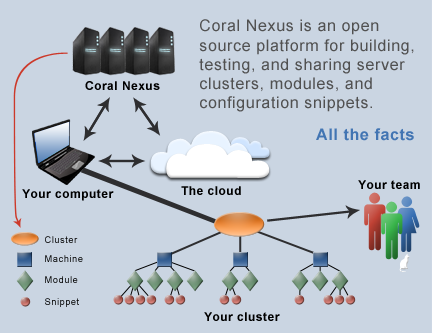
<style>
.page{position:relative;width:432px;height:333px;background:#cad5e2}
.page>*{position:absolute;margin:0}
.t1{font:16px "ArialMT";letter-spacing:0.04em;color:#515151}
.t2{font:12px "Arial-BoldMT";letter-spacing:0.04em;color:#000000}
.t3{font:16px "Arial-BoldMT";letter-spacing:0.04em;color:#4275b3}
.t4{font:9.6px "ArialMT";letter-spacing:0.04em;color:#010101}
.t5{font:9.6px "ArialMT";letter-spacing:0.04em}
</style>
<div class="page">
<p class="t1" style="left:199px;top:19px;width:215px;height:93px">Coral Nexus is an open source platform for building, testing, and sharing server clusters, modules, and configuration snippets.</p>
<p class="t2" style="left:85px;top:81px;width:75px;height:9px">Coral Nexus</p>
<p class="t3" style="left:316px;top:128px;width:98px;height:13px">All the facts</p>
<p class="t2" style="left:358px;top:180px;width:62px;height:9px">Your team</p>
<p class="t2" style="left:22px;top:189px;width:92px;height:12px">Your computer</p>
<p class="t2" style="left:181px;top:186px;width:60px;height:9px">The cloud</p>
<p class="t4" style="left:45px;top:236px;width:33px;height:7px">Cluster</p>
<p class="t5" style="left:45px;top:255px;width:38px;height:7px">Machine</p>
<p class="t5" style="left:45px;top:276px;width:33px;height:7px">Module</p>
<p class="t5" style="left:45px;top:298px;width:34px;height:9px">Snippet</p>
<p class="t2" style="left:204px;top:312px;width:76px;height:9px">Your cluster</p>
</div>
